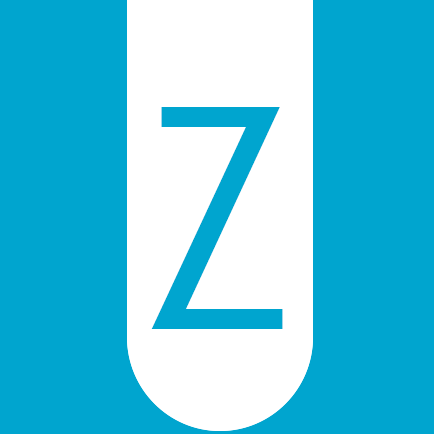
<style>
.page{position:relative;width:434px;height:434px;background:#00a5cf}
.page>*{position:absolute;margin:0}
.t1{font:333px "OratorStd";color:#00a5cf}
</style>
<div class="page">
<p class="t1" style="left:151px;top:107px;width:132px;height:222px">Z</p>
</div>
